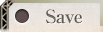
<style>
.page{position:relative;width:103px;height:32px}
.page>*{position:absolute;margin:0}
.t1{font:18px "RyuminPro-ExBold";letter-spacing:-0.04em;color:#625e57}
</style>
<div class="page">
<p class="t1" style="left:46px;top:9px;width:36px;height:15px">Save</p>
</div>
